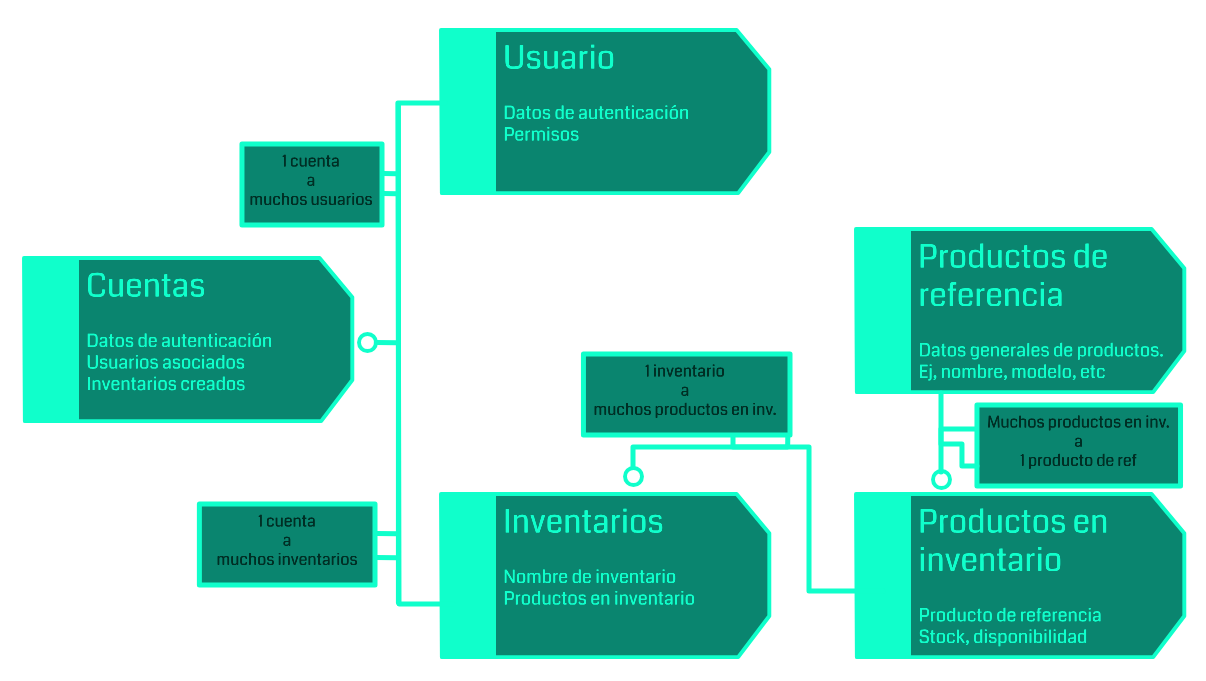
<style>
.page{position:relative;width:1206px;height:681px;background:#ffffff}
.page>*{position:absolute;margin:0}
.t1{font:18px "Coda-Regular";color:#10ffcb}
.t2{font:32px "Coda-Regular";color:#10ffcb}
.t3{font:16px "Coda-Regular";color:#002f25}
</style>
<div class="page">
<p class="t1" style="left:504px;top:44px;width:185px;height:97px"><span class="t2">Usuario<br><br></span>Datos de autenticación<br>Permisos</p>
<p class="t3" style="left:250px;top:154px;width:122px;height:51px;text-align:center">1 cuenta<br>a<br>muchos usuarios</p>
<p class="t1" style="left:920px;top:243px;width:243px;height:138px"><span class="t2">Productos de referencia<br><br></span>Datos generales de productos.<br>Ej, nombre, modelo, etc</p>
<p class="t1" style="left:87px;top:272px;width:185px;height:119px"><span class="t2">Cuentas<br><br></span>Datos de autenticación<br>Usuarios asociados<br>Inventarios creados</p>
<p class="t3" style="left:594px;top:364px;width:182px;height:54px;text-align:center">1 inventario<br>a<br>muchos productos en inv.</p>
<p class="t3" style="left:988px;top:415px;width:181px;height:54px;text-align:center">Muchos productos en inv.<br>a<br>1 producto de ref</p>
<p class="t1" style="left:504px;top:508px;width:190px;height:97px"><span class="t2">Inventarios<br><br></span>Nombre de inventario<br>Productos en inventario</p>
<p class="t1" style="left:919px;top:508px;width:188px;height:139px"><span class="t2">Productos en inventario<br><br></span>Producto de referencia<br>Stock, disponibilidad</p>
<p class="t3" style="left:217px;top:514px;width:140px;height:51px;text-align:center">1 cuenta<br>a<br>muchos inventarios</p>
</div>
